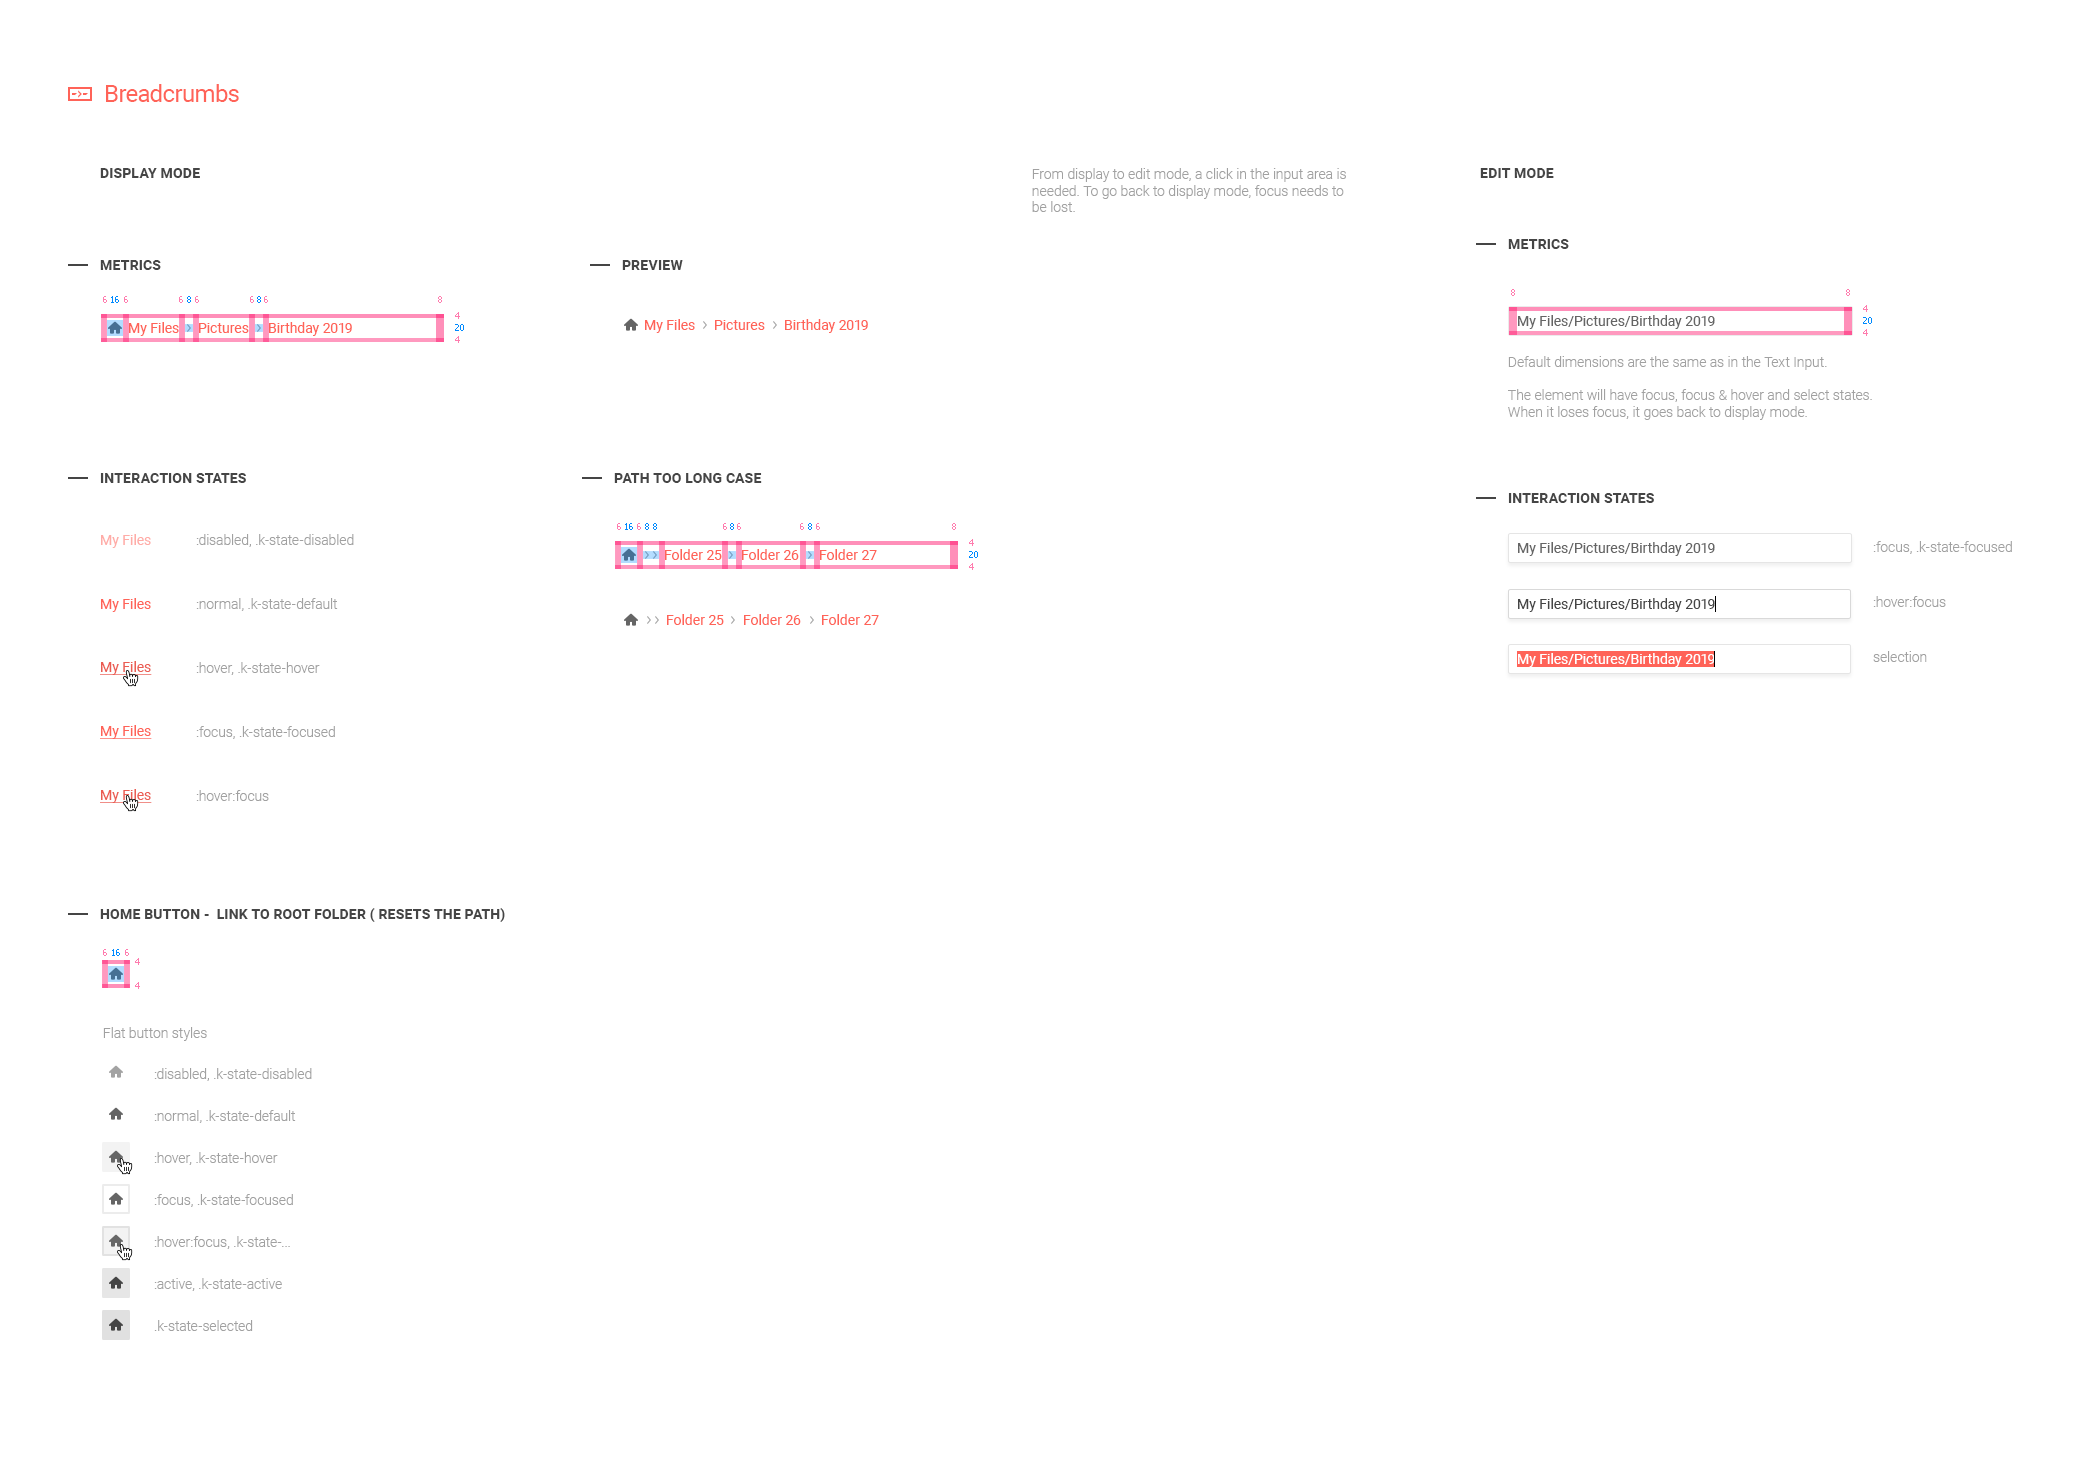
<style>
.page{position:relative;width:2089px;height:1458px;background:#ffffff}
.page>*{position:absolute;margin:0}
.t1{font:24px "Roboto-Regular";letter-spacing:-0.025em;color:#ff6358}
.t2{font:14px "Roboto-Bold";letter-spacing:0.01em;color:#454545;text-transform:uppercase}
.t3{font:14px "Roboto-Light";color:#a1a1a1}
.t4{font:9px "Tahoma";color:#ff7cae}
.t5{font:9px "Tahoma";color:#008aff}
.t6{font:14px "Roboto-Regular";color:#656565}
.t7{font:14px "Roboto-Regular";color:#ff6358}
.t8{font:14px "Roboto-Regular";color:#ffaca7}
.t9{font:14px/64px "Roboto-Light";color:#a1a1a1}
.t10{font:14px/55px "Roboto-Light";color:#a1a1a1}
.t11{font:14px "Roboto-Regular";color:#454545}
.t12{font:14px "Roboto-Regular";color:#ffffff}
.t13{font:14px "Roboto-Regular";color:#eb5b51;text-decoration:underline}
.t14{font:14px "Roboto-Regular";color:#ff6358;text-decoration:underline}
.t15{font:14px/42px "Roboto-Light";color:#a1a1a1}
</style>
<div class="page">
<p class="t1" style="left:106px;top:84px;width:133px;height:18px">Breadcrumbs</p>
<p class="t2" style="left:100px;top:168px;width:100px;height:10px">display mode</p>
<p class="t3" style="left:1032px;top:168px;width:314px;height:44px">From display to edit mode, a click in the input area is <br>needed. To go back to display mode, focus needs to <br>be lost.</p>
<p class="t2" style="left:1480px;top:168px;width:74px;height:10px">edit mode</p>
<p class="t2" style="left:1508px;top:239px;width:61px;height:10px">Metrics</p>
<p class="t2" style="left:100px;top:260px;width:61px;height:10px">Metrics</p>
<p class="t2" style="left:622px;top:260px;width:61px;height:10px">preview</p>
<p class="t4" style="left:1511px;top:289px;width:4px;height:7px">8</p>
<p class="t4" style="left:1846px;top:289px;width:4px;height:7px">8</p>
<p class="t4" style="left:103px;top:296px;width:4px;height:7px">6</p>
<p class="t5" style="left:111px;top:296px;width:8px;height:7px">16</p>
<p class="t4" style="left:124px;top:296px;width:4px;height:7px">6</p>
<p class="t4" style="left:179px;top:296px;width:4px;height:7px">6</p>
<p class="t5" style="left:187px;top:296px;width:4px;height:7px">8</p>
<p class="t4" style="left:195px;top:296px;width:4px;height:7px">6</p>
<p class="t4" style="left:250px;top:296px;width:4px;height:7px">6</p>
<p class="t5" style="left:257px;top:296px;width:4px;height:7px">8</p>
<p class="t4" style="left:264px;top:296px;width:4px;height:7px">6</p>
<p class="t4" style="left:438px;top:296px;width:4px;height:7px">8</p>
<p class="t4" style="left:1863px;top:305px;width:5px;height:7px">4</p>
<p class="t4" style="left:455px;top:312px;width:5px;height:7px">4</p>
<p class="t6" style="left:1518px;top:315px;width:197px;height:14px">My Files/Pictures/Birthday 2019</p>
<p class="t5" style="left:1863px;top:317px;width:9px;height:7px">20</p>
<p class="t7" style="left:129px;top:322px;width:50px;height:14px">My Files</p>
<p class="t7" style="left:199px;top:323px;width:50px;height:10px">Pictures</p>
<p class="t7" style="left:269px;top:322px;width:83px;height:14px">Birthday 2019</p>
<p class="t5" style="left:455px;top:324px;width:9px;height:7px">20</p>
<p class="t7" style="left:645px;top:319px;width:50px;height:14px">My Files</p>
<p class="t7" style="left:715px;top:320px;width:50px;height:10px">Pictures</p>
<p class="t7" style="left:785px;top:319px;width:83px;height:14px">Birthday 2019</p>
<p class="t4" style="left:1863px;top:329px;width:5px;height:7px">4</p>
<p class="t4" style="left:455px;top:336px;width:5px;height:7px">4</p>
<p class="t3" style="left:1508px;top:356px;width:364px;height:64px">Default dimensions are the same as in the Text Input.<br><br>The element will have focus, focus &amp; hover and select states.<br>When it loses focus, it goes back to display mode.</p>
<p class="t2" style="left:100px;top:473px;width:146px;height:10px">interaction states</p>
<p class="t2" style="left:614px;top:473px;width:148px;height:10px">Path too long case</p>
<p class="t2" style="left:1508px;top:493px;width:146px;height:10px">interaction states</p>
<p class="t8" style="left:101px;top:534px;width:50px;height:14px">My Files</p>
<p class="t9" style="left:196px;top:534px;width:158px;height:267px">:disabled, .k-state-disabled<br>:normal, .k-state-default<br>:hover, .k-state-hover<br>:focus, .k-state-focused<br>:hover:focus</p>
<p class="t4" style="left:617px;top:523px;width:4px;height:7px">6</p>
<p class="t5" style="left:625px;top:523px;width:8px;height:7px">16</p>
<p class="t4" style="left:637px;top:523px;width:4px;height:7px">6</p>
<p class="t4" style="left:637px;top:523px;width:4px;height:7px">6</p>
<p class="t5" style="left:645px;top:523px;width:4px;height:7px">8</p>
<p class="t5" style="left:653px;top:523px;width:4px;height:7px">8</p>
<p class="t4" style="left:723px;top:523px;width:4px;height:7px">6</p>
<p class="t5" style="left:730px;top:523px;width:4px;height:7px">8</p>
<p class="t4" style="left:737px;top:523px;width:4px;height:7px">6</p>
<p class="t4" style="left:800px;top:523px;width:4px;height:7px">6</p>
<p class="t5" style="left:808px;top:523px;width:4px;height:7px">8</p>
<p class="t4" style="left:816px;top:523px;width:4px;height:7px">6</p>
<p class="t4" style="left:952px;top:523px;width:4px;height:7px">8</p>
<p class="t4" style="left:969px;top:539px;width:5px;height:7px">4</p>
<p class="t6" style="left:1518px;top:542px;width:197px;height:14px">My Files/Pictures/Birthday 2019</p>
<p class="t10" style="left:1873px;top:541px;width:139px;height:121px">:focus, .k-state-focused<br>:hover:focus<br>selection</p>
<p class="t7" style="left:665px;top:549px;width:57px;height:11px">Folder 25</p>
<p class="t7" style="left:742px;top:549px;width:57px;height:11px">Folder 26</p>
<p class="t7" style="left:820px;top:549px;width:57px;height:11px">Folder 27</p>
<p class="t5" style="left:969px;top:551px;width:9px;height:7px">20</p>
<p class="t4" style="left:969px;top:563px;width:5px;height:7px">4</p>
<p class="t7" style="left:101px;top:598px;width:50px;height:14px">My Files</p>
<p class="t11" style="left:1518px;top:598px;width:197px;height:14px">My Files/Pictures/Birthday 2019</p>
<p class="t7" style="left:667px;top:614px;width:57px;height:11px">Folder 25</p>
<p class="t7" style="left:744px;top:614px;width:57px;height:11px">Folder 26</p>
<p class="t7" style="left:822px;top:614px;width:57px;height:11px">Folder 27</p>
<p class="t12" style="left:1518px;top:653px;width:197px;height:14px">My Files/Pictures/Birthday 2019</p>
<p class="t13" style="left:100px;top:661px;width:52px;height:14px">My Files</p>
<p class="t14" style="left:100px;top:725px;width:52px;height:14px">My Files</p>
<p class="t13" style="left:100px;top:789px;width:52px;height:14px">My Files</p>
<p class="t2" style="left:100px;top:908px;width:405px;height:14px">home button -  link to root folder ( resets the path)</p>
<p class="t4" style="left:103px;top:949px;width:4px;height:7px">6</p>
<p class="t5" style="left:112px;top:949px;width:8px;height:7px">16</p>
<p class="t4" style="left:125px;top:949px;width:4px;height:7px">6</p>
<p class="t4" style="left:135px;top:958px;width:5px;height:7px">4</p>
<p class="t4" style="left:135px;top:982px;width:5px;height:7px">4</p>
<p class="t3" style="left:103px;top:1027px;width:104px;height:14px">Flat button styles</p>
<p class="t15" style="left:154px;top:1068px;width:158px;height:263px">:disabled, .k-state-disabled<br>:normal, .k-state-default<br>:hover, .k-state-hover<br>:focus, .k-state-focused<br>:hover:focus, .k-state-...<br>:active, .k-state-active<br>.k-state-selected</p>
</div>
